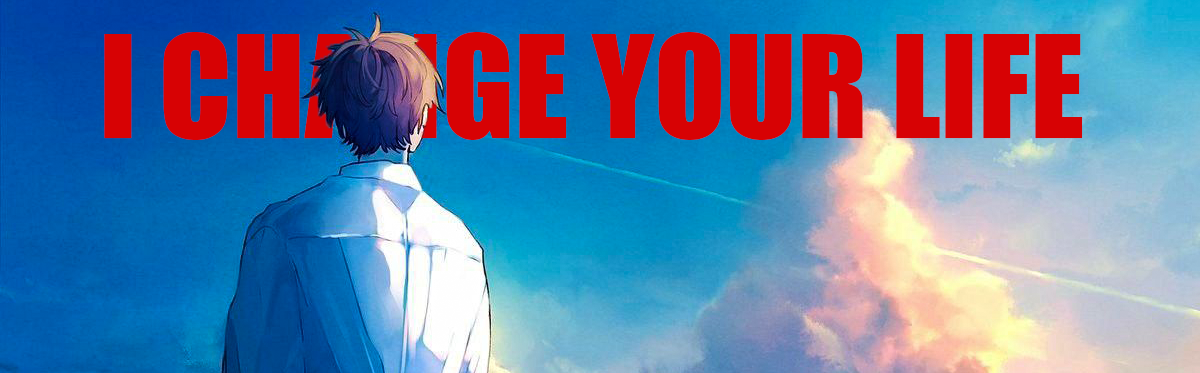
<style>
.page{position:relative;width:1200px;height:373px}
.page>*{position:absolute;margin:0}
.t1{font:131px "Impact";color:#d70204}
</style>
<div class="page">
<p class="t1" style="left:104px;top:32px;width:979px;height:108px">I CHANGE YOUR LIFE</p>
</div>
